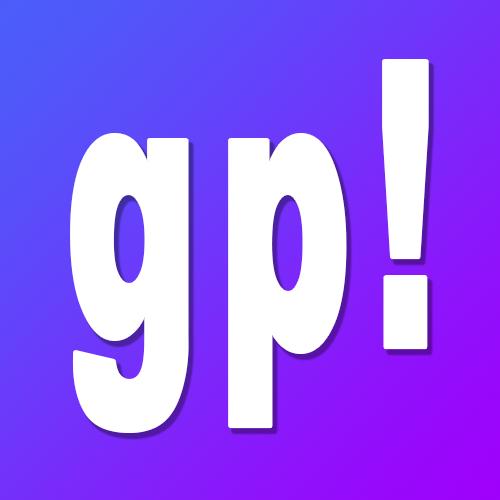
<style>
.page{position:relative;width:500px;height:500px;background:#ffffff}
.page>*{position:absolute;margin:0}
.t1{font:400px "Arial-Black";letter-spacing:0.1em;color:#ffffff;scale:0.5 1}
</style>
<div class="page">
<p class="t1" style="left:72px;top:61px;width:355px;height:370px">gp!</p>
</div>
